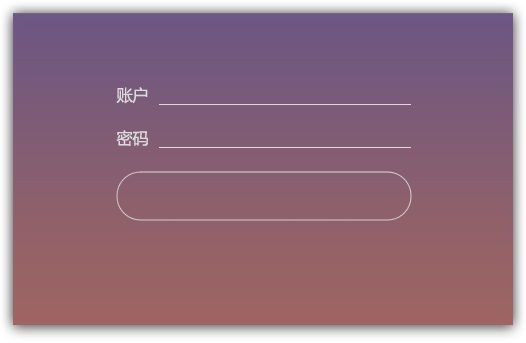
<style>
.page{position:relative;width:526px;height:343px}
.page>*{position:absolute;margin:0}
.t1{font:16.8px "FZLTHJW--GB1-0";letter-spacing:-0.045em;color:#dcdcdc}
</style>
<div class="page">
<p class="t1" style="left:116px;top:87px;width:32px;height:17px">账户</p>
<p class="t1" style="left:116px;top:130px;width:32px;height:16px">密码</p>
</div>
